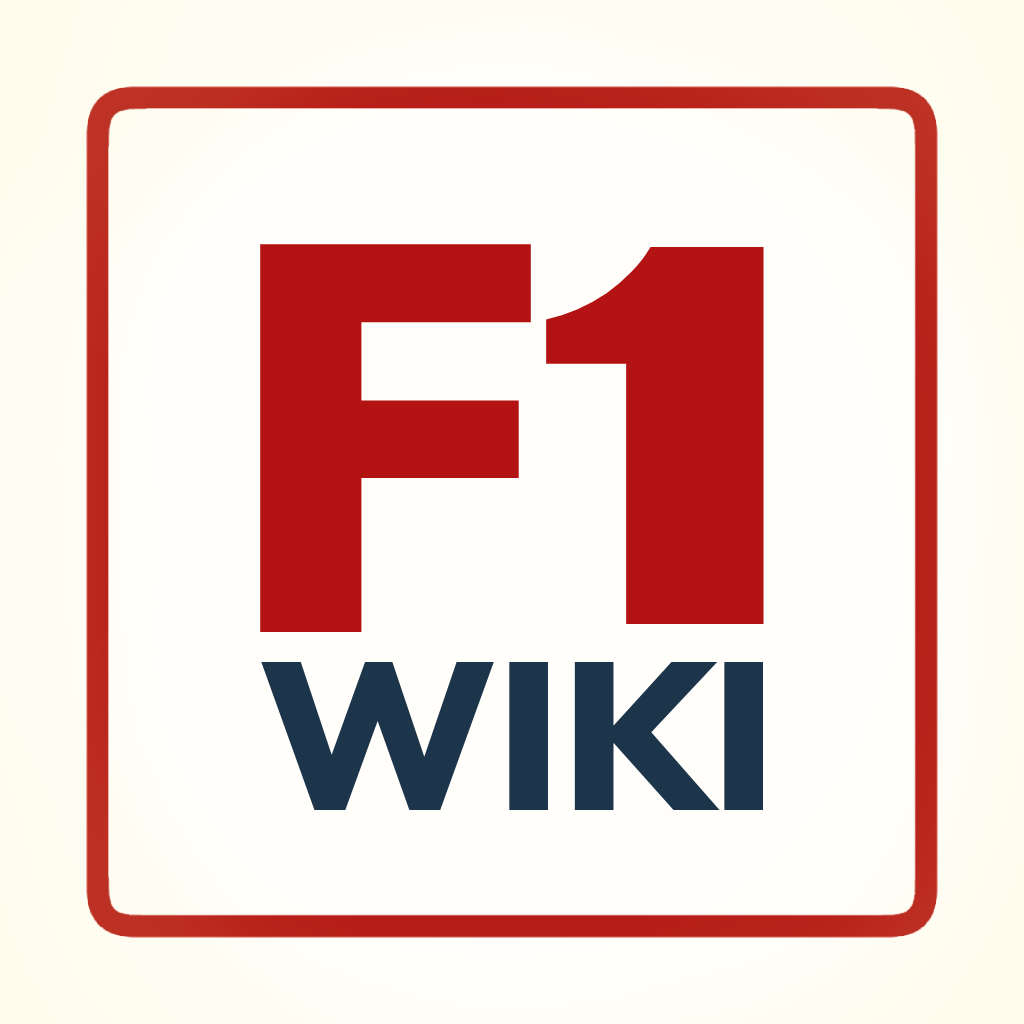
<style>
.page{position:relative;width:1024px;height:1024px;background:#fffefb}
.page>*{position:absolute;margin:0}
.t1{font:550px "NunitoSans-Black";color:#b31312}
.t2{font:520px "PollerOne-Regular";color:#b31312}
.t3{font:210px "NunitoSans-Black";color:#1d354b}
</style>
<div class="page">
<p class="t1" style="left:260px;top:244px;width:271px;height:388px">F</p>
<p class="t2" style="left:546px;top:246px;width:218px;height:378px">1</p>
<p class="t3" style="left:261px;top:661px;width:502px;height:149px">WIKI</p>
</div>
